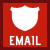
<style>
.page{position:relative;width:50px;height:50px;background:#c81e10}
.page>*{position:absolute;margin:0}
.t1{font:13px "AdventPro-Bold";color:#ffffff}
</style>
<div class="page">
<p class="t1" style="left:9px;top:35px;width:32px;height:11px">EMAIL</p>
</div>
